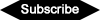
<style>
.page{position:relative;width:100px;height:20px;background:#000000}
.page>*{position:absolute;margin:0}
.t1{font:12.5px "ArialMT";color:#ffffff;font-weight:bold}
</style>
<div class="page">
<p class="t1" style="left:21px;top:4px;width:58px;height:10px">Subscribe</p>
</div>
